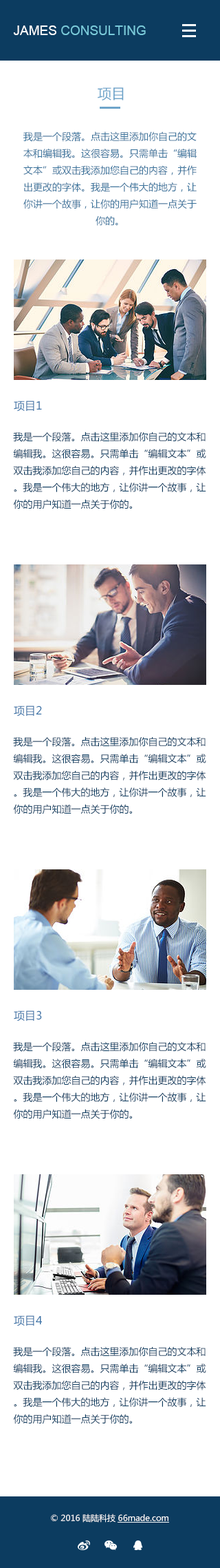
<style>
.page{position:relative;width:220px;height:1568px;background:#ffffff}
.page>*{position:absolute;margin:0}
.t1{font:13.1px "ArialMT";color:#79cada}
.t2{font:13.1px "ArialMT";color:#ffffff}
.t3{font:13.8px "MicrosoftYaHei";color:#6ea4ca}
.t4{font:9.6px "MicrosoftYaHei";color:#39729b}
.t5{font:11px "MicrosoftYaHei";color:#3972a7}
.t6{font:9.6px "MicrosoftYaHei";color:#0c3c60}
.t7{font:8.3px "MicrosoftYaHei";color:#ffffff}
</style>
<div class="page">
<p class="t1" style="left:13px;top:25px;width:133px;height:10px"><span class="t2">JAMES </span>CONSULTING</p>
<p class="t3" style="left:98px;top:87px;width:26px;height:13px">项目</p>
<p class="t4" style="left:23px;top:131px;width:174px;height:95px;text-align:center">我是一个段落。点击这里添加你自己的文本和编辑我。这很容易。只需单击“编辑文本”或双击我添加您自己的内容，并作出更改的字体。我是一个伟大的地方，让你讲一个故事，让你的用户知道一点关于你的。</p>
<p class="t5" style="left:14px;top:401px;width:28px;height:11px">项目1</p>
<p class="t6" style="left:13px;top:432px;width:193px;height:77px">我是一个段落。点击这里添加你自己的文本和编辑我。这很容易。只需单击“编辑文本”或双击我添加您自己的内容，并作出更改的字体。我是一个伟大的地方，让你讲一个故事，让你的用户知道一点关于你的。</p>
<p class="t5" style="left:14px;top:706px;width:28px;height:11px">项目2</p>
<p class="t6" style="left:13px;top:737px;width:193px;height:77px">我是一个段落。点击这里添加你自己的文本和编辑我。这很容易。只需单击“编辑文本”或双击我添加您自己的内容，并作出更改的字体。我是一个伟大的地方，让你讲一个故事，让你的用户知道一点关于你的。</p>
<p class="t5" style="left:14px;top:1010px;width:28px;height:11px">项目3</p>
<p class="t6" style="left:13px;top:1041px;width:193px;height:78px">我是一个段落。点击这里添加你自己的文本和编辑我。这很容易。只需单击“编辑文本”或双击我添加您自己的内容，并作出更改的字体。我是一个伟大的地方，让你讲一个故事，让你的用户知道一点关于你的。</p>
<p class="t5" style="left:14px;top:1315px;width:28px;height:11px">项目4</p>
<p class="t6" style="left:13px;top:1346px;width:193px;height:78px">我是一个段落。点击这里添加你自己的文本和编辑我。这很容易。只需单击“编辑文本”或双击我添加您自己的内容，并作出更改的字体。我是一个伟大的地方，让你讲一个故事，让你的用户知道一点关于你的。</p>
<p class="t7" style="left:51px;top:1514px;width:118px;height:9px">© 2016 陆陆科技 66made.com</p>
</div>
